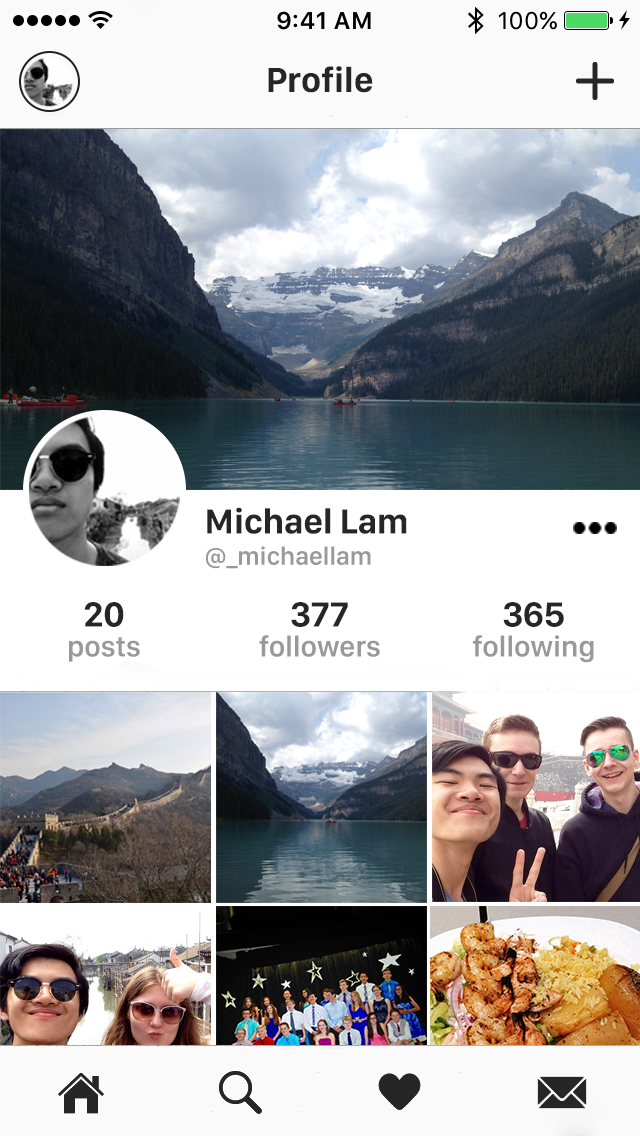
<style>
.page{position:relative;width:640px;height:1136px}
.page>*{position:absolute;margin:0}
.t1{font:36px "SanFranciscoDisplay-Bold";color:#262626}
.t2{font:26px "SanFranciscoDisplay-Semibold";color:#999999}
.t3{font:30px/30px "SanFranciscoDisplay-Semibold";color:#999999}
.t4{font:36px/30px "SanFranciscoDisplay-Bold";color:#262626}
</style>
<div class="page">
<p class="t1" style="left:268px;top:66px;width:105px;height:27px">Profile</p>
<p class="t2" style="left:206px;top:507px;width:201px;height:62px"><span class="t1">Michael Lam<br></span>@_michaellam</p>
<p class="t3" style="left:69px;top:602px;width:71px;height:60px;text-align:center"><span class="t4">20<br></span>posts</p>
<p class="t3" style="left:259px;top:602px;width:121px;height:55px;text-align:center"><span class="t4">377<br></span>followers</p>
<p class="t3" style="left:473px;top:602px;width:121px;height:61px;text-align:center"><span class="t4">365<br></span>following</p>
</div>
